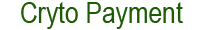
<style>
.page{position:relative;width:200px;height:30px;background:#ffffff}
.page>*{position:absolute;margin:0}
.t1{font:30px "ArialNarrow";color:#1e5b05}
</style>
<div class="page">
<p class="t1" style="left:21px;top:2px;width:162px;height:27px">Cryto Payment</p>
</div>
